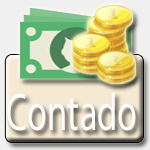
<style>
.page{position:relative;width:150px;height:150px}
.page>*{position:absolute;margin:0}
.t1{font:53px "MyriadPro-Regular";color:#fcfcfc;scale:0.69 1}
</style>
<div class="page">
<p class="t1" style="left:7px;top:92px;width:129px;height:39px">Contado</p>
</div>
